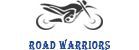
<style>
.page{position:relative;width:139px;height:50px;background:#ffffff}
.page>*{position:absolute;margin:0}
.t1{font:11.8px "Algerian";letter-spacing:0.075em;color:#1c468d;scale:0.79 1}
</style>
<div class="page">
<p class="t1" style="left:29px;top:39px;width:81px;height:11px">Road Warriors</p>
</div>
